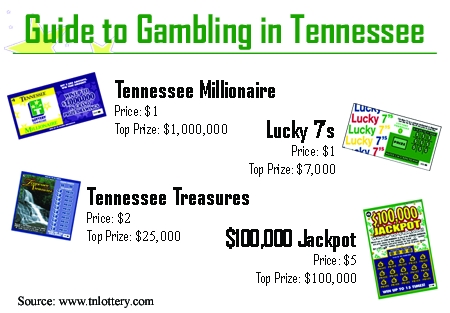
<style>
.page{position:relative;width:450px;height:313px;background:#ffffff}
.page>*{position:absolute;margin:0}
.t1{font:37.5px "AgencyFB-Bold";color:#19a500}
.t2{font:22.5px "AgencyFB-Bold";color:#060808}
.t3{font:15px "AgencyFB-Reg";color:#060808}
.t4{font:15px "TimesNewRomanPSMT";color:#060808}
.t5{font:12.5px "TimesNewRomanPSMT";color:#060808}
</style>
<div class="page">
<p class="t1" style="left:25px;top:14px;width:399px;height:36px">Guide to Gambling in Tennessee</p>
<p class="t2" style="left:115px;top:80px;width:160px;height:57px">Tennessee Millionaire<br><span class="t3">Price: </span><span class="t4">$1<br></span><span class="t3">Top Prize:</span><span class="t4"> $1,000,000</span></p>
<p class="t3" style="left:249px;top:120px;width:86px;height:57px;text-align:right"><span class="t2">Lucky 7’s<br></span>Price: <span class="t4">$1<br></span>Top Prize: <span class="t4">$7,000</span></p>
<p class="t2" style="left:87px;top:187px;width:162px;height:57px">Tennessee Treasures<br><span class="t3">Price: </span><span class="t4">$2<br></span><span class="t3">Top Prize: </span><span class="t4">$25,000</span></p>
<p class="t2" style="left:226px;top:227px;width:130px;height:59px;text-align:right">$100,000 Jackpot<br><span class="t3">Price: </span><span class="t4">$5<br></span><span class="t3">Top Prize: </span><span class="t4">$100,000</span></p>
<p class="t5" style="left:18px;top:296px;width:136px;height:12px">Source: www.tnlottery.com</p>
</div>
